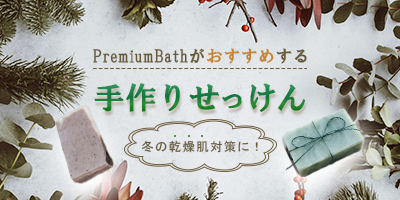
<style>
.page{position:relative;width:400px;height:200px}
.page>*{position:absolute;margin:0}
.t1{font:16.7px "HGSSoeiPresenceEB";letter-spacing:0.04em;color:#685939}
.t2{font:16.7px "HGSSoeiPresenceEB";letter-spacing:0.04em;color:#c48432}
.t3{font:31.8px "HGSSoeiPresenceEB";letter-spacing:-0.06em;color:#1c813d}
.t4{font:31.8px "HGSSoeiPresenceEB";color:#1c813d}
.t5{font:12.5px "MS-PGothic";letter-spacing:0.1em;color:#685939}
</style>
<div class="page">
<p class="t1" style="left:93px;top:48px;width:214px;height:16px">PremiumBathが<span class="t2">おすすめ</span>する</p>
<p class="t3" style="left:94px;top:82px;width:211px;height:30px"><span class="t4">手作り</span>せっけん</p>
<p class="t5" style="left:142px;top:140px;width:116px;height:13px">冬の乾燥肌対策に！</p>
</div>
